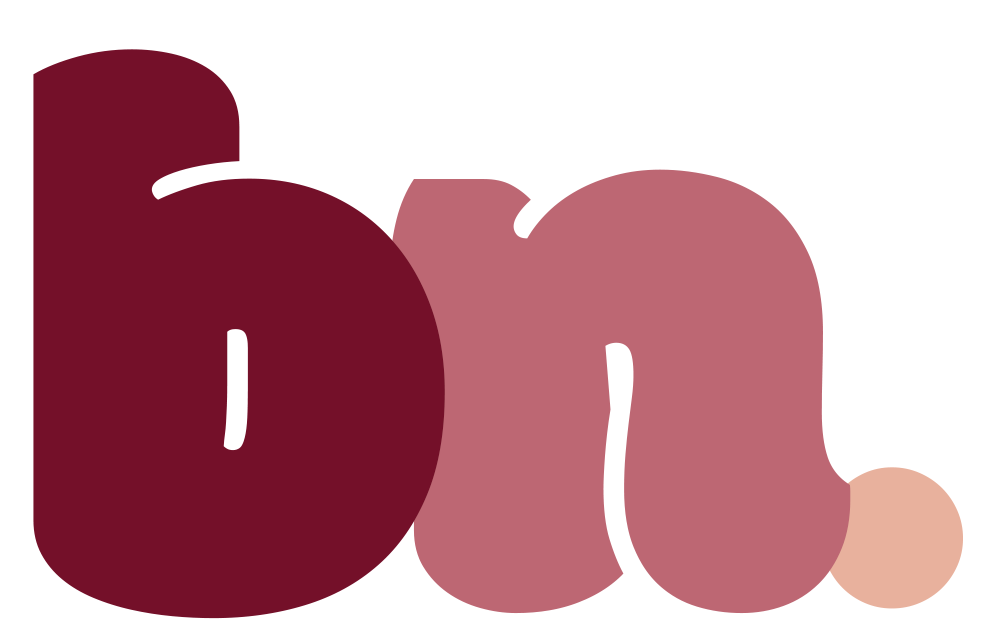
<style>
.page{position:relative;width:999px;height:628px;background:#ffffff}
.page>*{position:absolute;margin:0}
.t1{font:800px "Modak";color:#741029}
.t2{font:800px "Modak";color:#bd6773}
.t3{font:500px "Modak";color:#e8b19d}
</style>
<div class="page">
<p class="t1" style="left:33px;top:49px;width:412px;height:570px">b</p>
<p class="t2" style="left:390px;top:169px;width:461px;height:445px">n</p>
<p class="t3" style="left:821px;top:467px;width:142px;height:142px">.</p>
</div>
